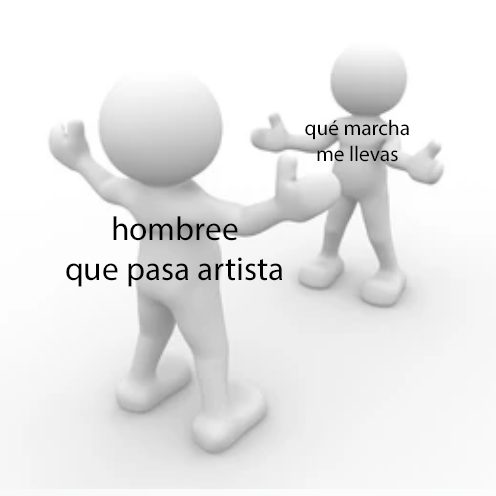
<style>
.page{position:relative;width:496px;height:496px;background:#ffffff}
.page>*{position:absolute;margin:0}
.t1{font:21.3px "MyriadPro-Regular";color:#000000}
.t2{font:33.4px "MyriadPro-Regular";color:#000000}
</style>
<div class="page">
<p class="t1" style="left:305px;top:119px;width:104px;height:43px;text-align:center">qué marcha<br>me llevas</p>
<p class="t2" style="left:66px;top:216px;width:216px;height:71px;text-align:center">hombree<br>que pasa artista</p>
</div>
